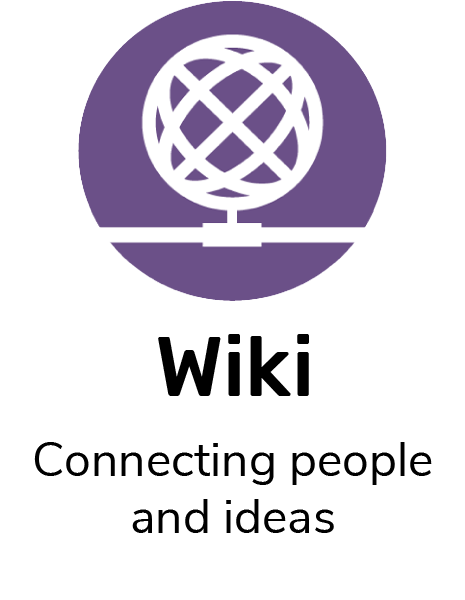
<style>
.page{position:relative;width:465px;height:600px;background:#ffffff}
.page>*{position:absolute;margin:0}
.t1{font:84px "Rubik-Medium";color:#000000}
.t2{font:48px "NunitoSans-Regular";color:#000000}
</style>
<div class="page">
<p class="t1" style="left:158px;top:334px;width:151px;height:62px">Wiki</p>
<p class="t2" style="left:34px;top:442px;width:398px;height:91px;text-align:center">Connecting people and ideas</p>
</div>
